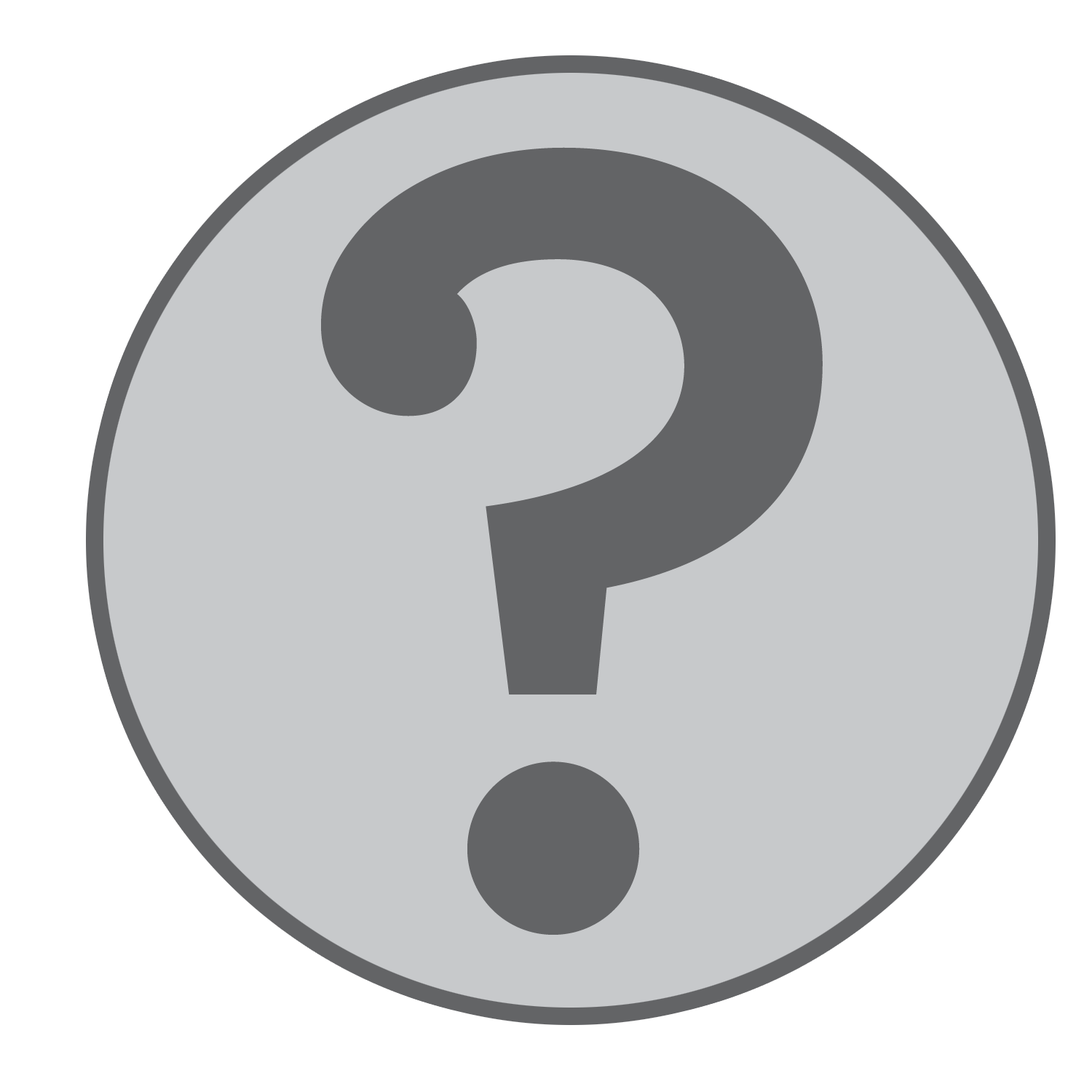
<style>
.page{position:relative;width:1092px;height:1092px;background:#c7c9cb}
.page>*{position:absolute;margin:0}
.t1{font:1160.8px "Archer-Bold";color:#636466}
</style>
<div class="page">
<p class="t1" style="left:321px;top:147px;width:502px;height:788px">?</p>
</div>
